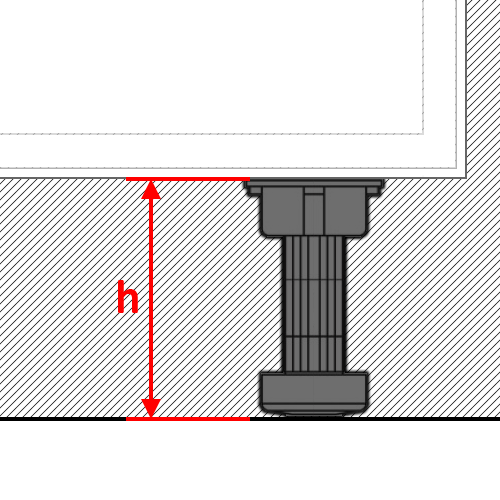
<style>
.page{position:relative;width:500px;height:500px;background:#ffffff}
.page>*{position:absolute;margin:0}
.t1{font:48px "Calibri-Bold";letter-spacing:-0.05em;color:#ff0000}
</style>
<div class="page">
<p class="t1" style="left:118px;top:280px;width:20px;height:33px">h</p>
</div>
